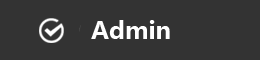
<style>
.page{position:relative;width:260px;height:60px;background:#333333}
.page>*{position:absolute;margin:0}
.t1{font:24px "MicrosoftYaHei-Bold";color:#ffffff}
</style>
<div class="page">
<p class="t1" style="left:91px;top:20px;width:79px;height:19px">Admin</p>
</div>
